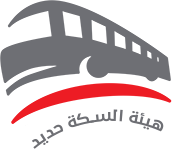
<style>
.page{position:relative;width:180px;height:158px;background:#ffffff}
.page>*{position:absolute;margin:0}
.t1{font:14px "29LTBukra-Medium";letter-spacing:0.02em;color:#6e6f74}
</style>
<div class="page">
<p class="t1" style="left:31px;top:109px;width:133px;height:40px;rotate:-8deg">هيئة السكة حديد</p>
</div>
